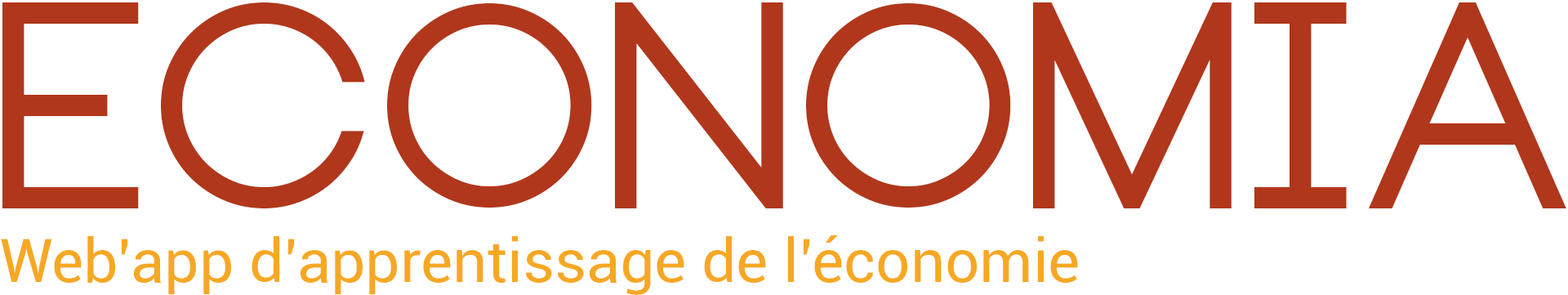
<style>
.page{position:relative;width:1568px;height:295px;background:#ffffff}
.page>*{position:absolute;margin:0}
.t1{font:287.8px "Neou-Bold";color:#b0371b}
.t2{font:60.8px "Roboto-Regular";color:#f6a823}
</style>
<div class="page">
<p class="t1" style="left:2px;top:2px;width:1564px;height:206px">Economia</p>
<p class="t2" style="left:1px;top:235px;width:1077px;height:60px">Web’app d’apprentissage de l’économie</p>
</div>
